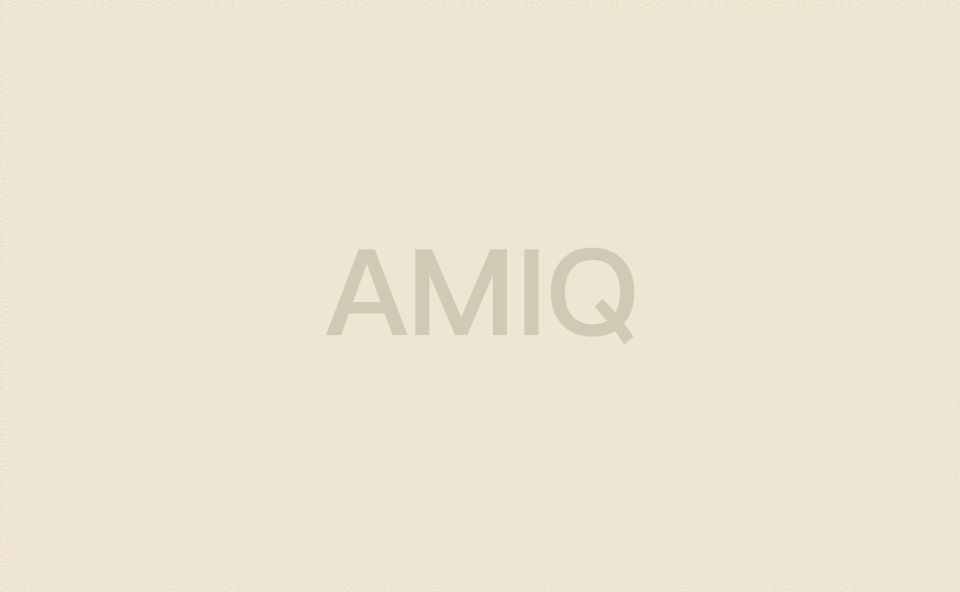
<style>
.page{position:relative;width:960px;height:592px;background:#ede6d4}
.page>*{position:absolute;margin:0}
.t1{font:120px "PingFangTC-Semibold";color:#d0cab4}
</style>
<div class="page">
<p class="t1" style="left:326px;top:247px;width:309px;height:98px">AMIQ</p>
</div>
